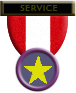
<style>
.page{position:relative;width:76px;height:93px;background:#ffffff}
.page>*{position:absolute;margin:0}
.t1{font:10px "Pericles";color:#424407}
</style>
<div class="page">
<p class="t1" style="left:20px;top:5px;width:38px;height:6px">service</p>
</div>
